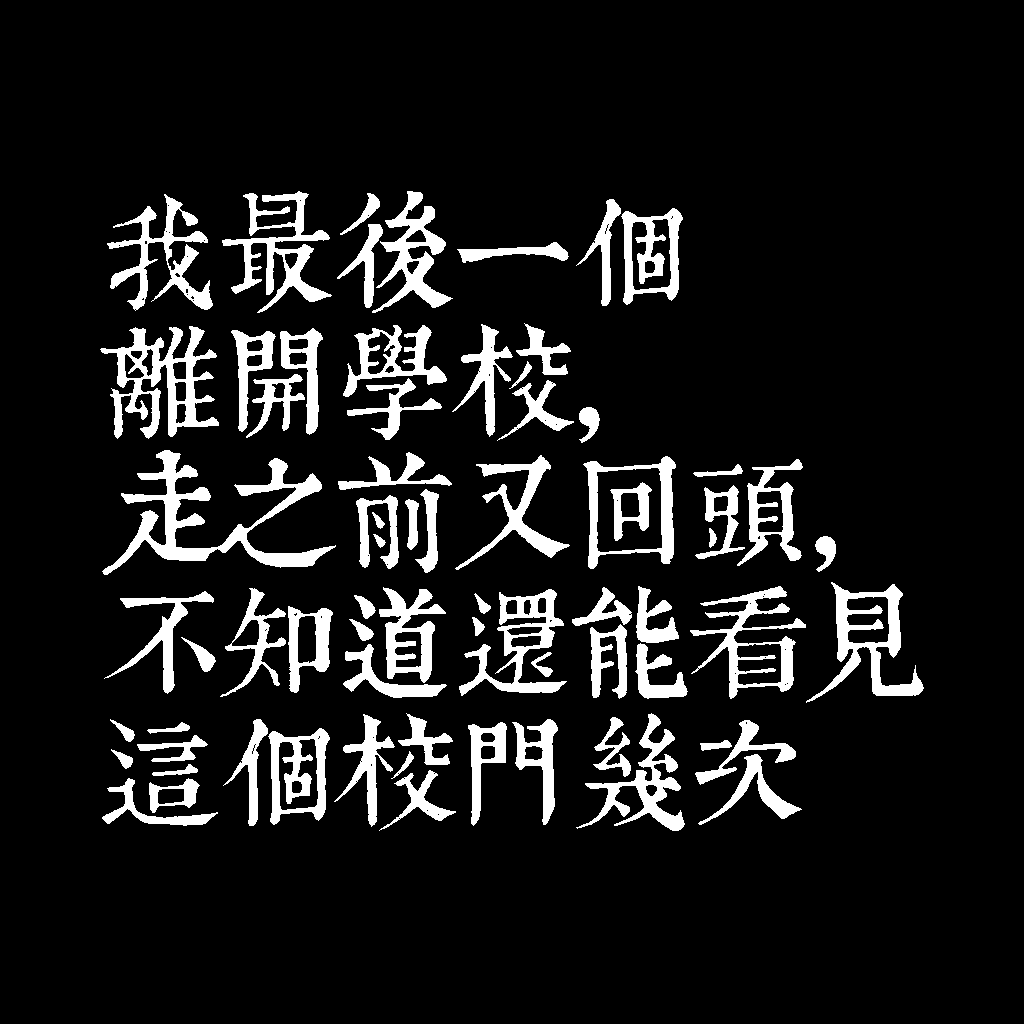
<style>
.page{position:relative;width:1024px;height:1024px;background:#000000}
.page>*{position:absolute;margin:0}
.t1{font:120px/130px "TpldKhangXiDictTrial";letter-spacing:-0.02em;color:#ffffff}
</style>
<div class="page">
<p class="t1" style="left:100px;top:191px;width:824px;height:640px">我最後一個<br>離開學校,<br>走之前又回頭，<br>不知道還能看見<br>這個校門幾次</p>
</div>
